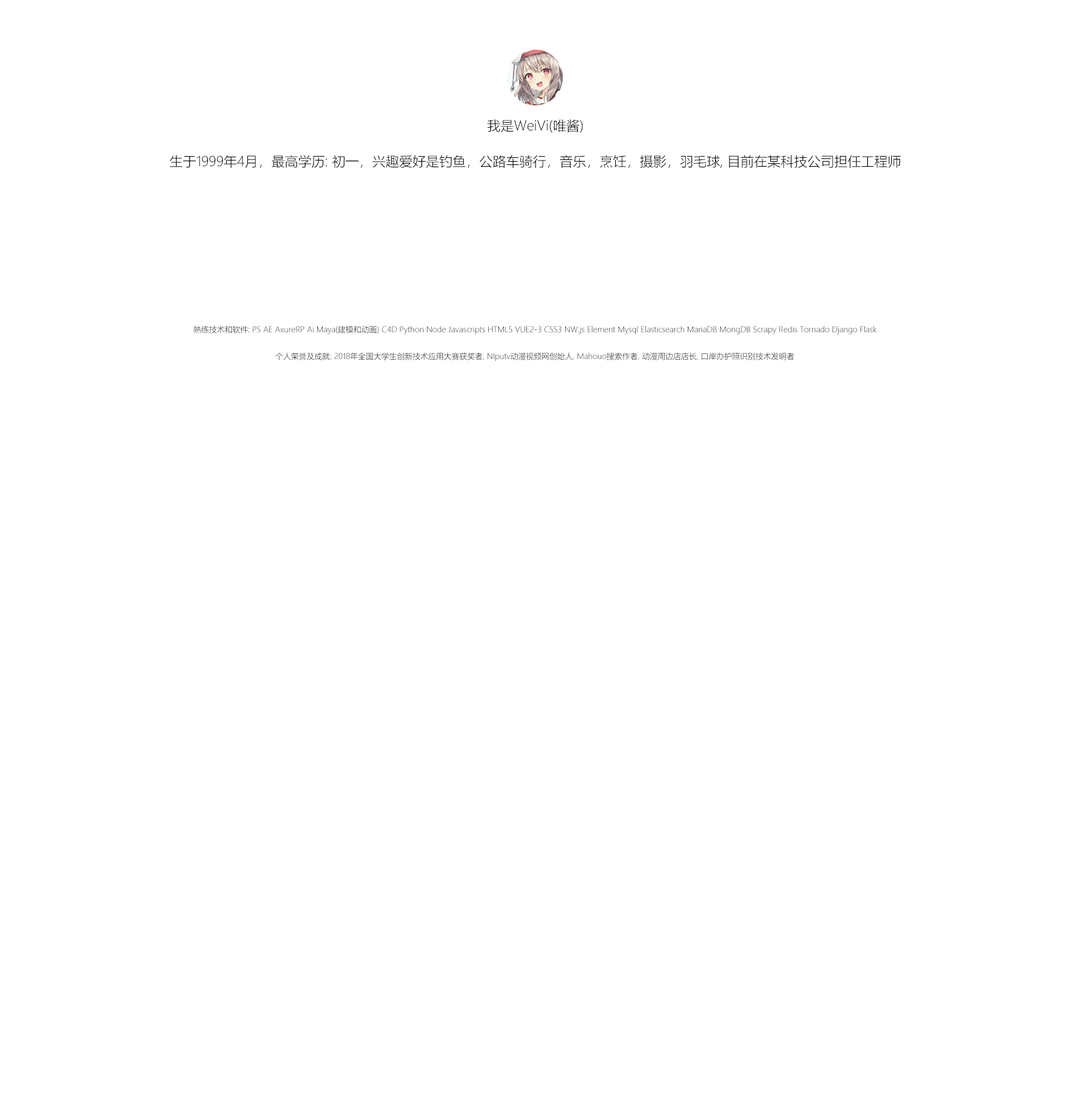
<style>
.page{position:relative;width:1070px;height:1115px;background:#ffffff}
.page>*{position:absolute;margin:0}
.t1{font:13.4px "MicrosoftYaHeiUILight";color:#000000}
.t2{font:7.8px "MicrosoftYaHeiUILight";color:#000000}
</style>
<div class="page">
<p class="t1" style="left:487px;top:119px;width:96px;height:14px">我是WeiVi(唯酱)</p>
<p class="t1" style="left:169px;top:155px;width:732px;height:13px">生于1999年4月，最高学历: 初一，兴趣爱好是钓鱼，公路车骑行，音乐，烹饪，摄影，羽毛球, 目前在某科技公司担任工程师</p>
<p class="t2" style="left:193px;top:325px;width:684px;height:9px">熟练技术和软件: PS AE AxureRP Ai Maya(建模和动画) C4D Python Node Javascripts HTML5 VUE2-3 CSS3 NW.js Element Mysql Elasticsearch MariaDB MongDB Scrapy Redis Tornado Django Flask</p>
<p class="t2" style="left:275px;top:352px;width:519px;height:9px">个人荣誉及成就: 2018年全国大学生创新技术应用大赛获奖者, NIputv动漫视频网创始人, Mahouo搜索作者, 动漫周边店店长, 口岸办护照识别技术发明者</p>
</div>
